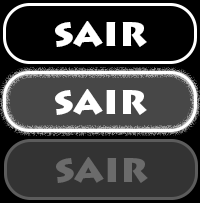
<style>
.page{position:relative;width:200px;height:203px;background:#000000}
.page>*{position:absolute;margin:0}
.t1{font:38.8px "LithosPro-Black";color:#ffffff}
.t2{font:38.8px "LithosPro-Black";color:#6b6b6b}
</style>
<div class="page">
<p class="t1" style="left:55px;top:21px;width:92px;height:26px">sair</p>
<p class="t1" style="left:55px;top:89px;width:92px;height:26px">sair</p>
<p class="t2" style="left:56px;top:157px;width:92px;height:26px">sair</p>
</div>
